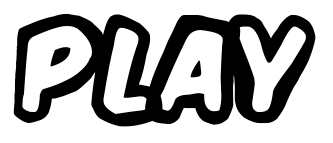
<style>
.page{position:relative;width:333px;height:143px;background:#ffffff}
.page>*{position:absolute;margin:0}
.t1{font:133.7px "AmericanSigns";color:#000000}
</style>
<div class="page">
<p class="t1" style="left:13px;top:14px;width:303px;height:113px">play</p>
</div>
